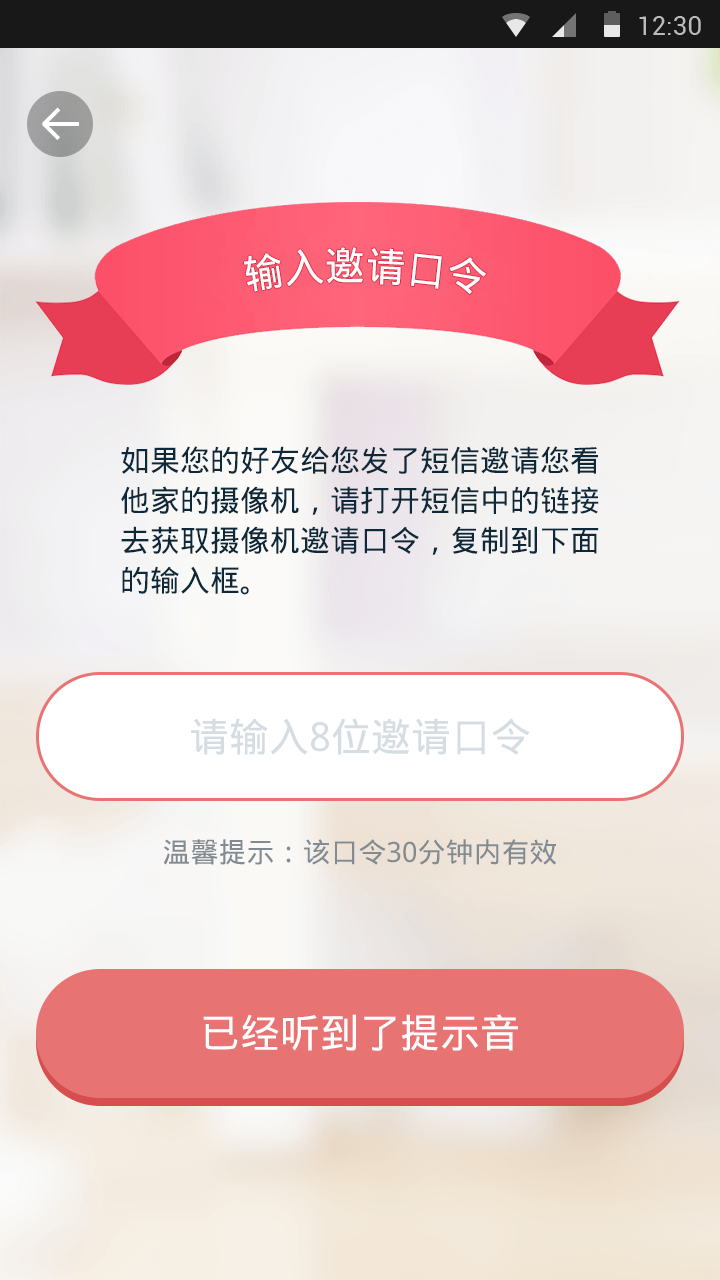
<style>
.page{position:relative;width:720px;height:1280px}
.page>*{position:absolute;margin:0}
.t1{font:40px "DroidSansFallback";color:#ffffff}
.t2{font:30px "DroidSansFallback";color:#0c2839}
.t3{font:40px "DroidSansFallback";color:#d5dde2}
.t4{font:28px "DroidSansFallback";color:#828b91}
</style>
<div class="page">
<p class="t1" style="left:244px;top:247px;width:242px;height:47px">输入邀请口令</p>
<p class="t2" style="left:121px;top:446px;width:477px;height:28px">如果您的好友给您发了短信邀请您看</p>
<p class="t2" style="left:121px;top:486px;width:478px;height:29px">他家的摄像机，请打开短信中的链接</p>
<p class="t2" style="left:121px;top:526px;width:478px;height:29px">去获取摄像机邀请口令，复制到下面</p>
<p class="t2" style="left:122px;top:566px;width:127px;height:29px">的输入框。</p>
<p class="t3" style="left:191px;top:718px;width:339px;height:37px">请输入8位邀请口令</p>
<p class="t4" style="left:163px;top:839px;width:393px;height:26px">温馨提示：该口令30分钟内有效</p>
<p class="t1" style="left:203px;top:1014px;width:315px;height:37px">已经听到了提示音</p>
</div>
